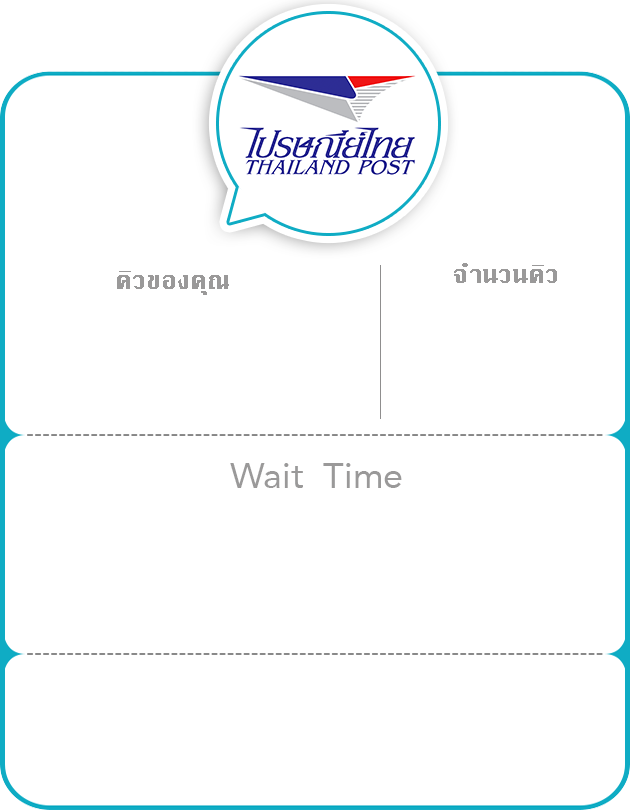
<style>
.page{position:relative;width:630px;height:810px;background:#ffffff}
.page>*{position:absolute;margin:0}
.t1{font:24px "Krungthep";color:#9a9999}
.t2{font:36px "Avenir-Roman";color:#9a9999}
</style>
<div class="page">
<p class="t1" style="left:454px;top:263px;width:103px;height:20px">จำนวนคิว</p>
<p class="t1" style="left:117px;top:271px;width:112px;height:24px">คิวของคุณ</p>
<p class="t2" style="left:230px;top:463px;width:172px;height:25px">Wait  Time</p>
</div>
